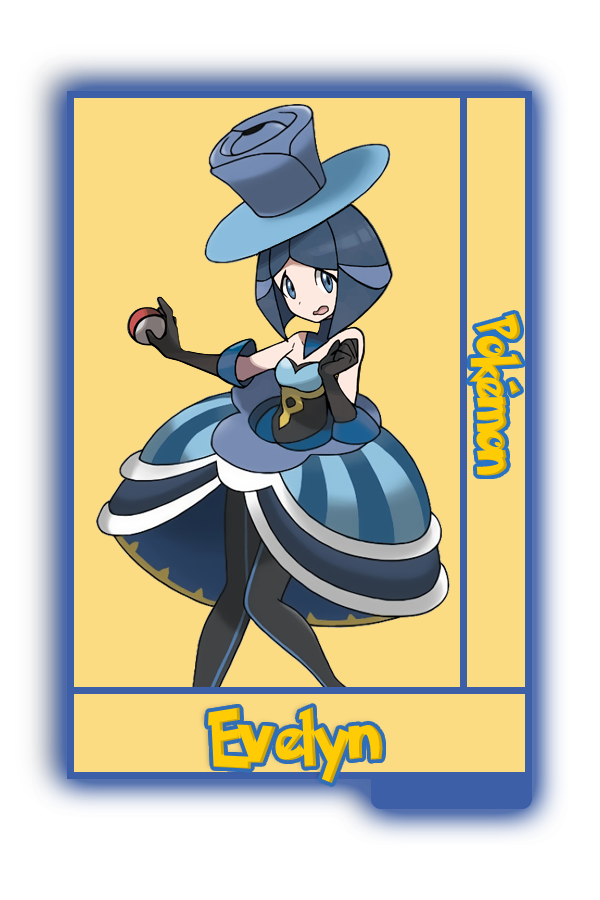
<style>
.page{position:relative;width:600px;height:900px;background:#fbdc83}
.page>*{position:absolute;margin:0}
.t1{font:48.8px "PokemonSolidNormal";color:#ffcb05;scale:0.8 1}
.t2{font:56.6px "PokemonSolidNormal";color:#ffcb05;scale:0.92 1}
</style>
<div class="page">
<p class="t1" style="left:469px;top:313px;width:54px;height:163px;rotate:90deg">Pokémon</p>
<p class="t2" style="left:207px;top:706px;width:176px;height:77px">Evelyn</p>
</div>
